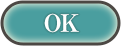
<style>
.page{position:relative;width:121px;height:46px;background:#4a9e9f}
.page>*{position:absolute;margin:0}
.t1{font:24px "RyuminPro-ExBold";letter-spacing:-0.04em;color:#ffffff}
</style>
<div class="page">
<p class="t1" style="left:44px;top:13px;width:35px;height:20px">OK</p>
</div>
